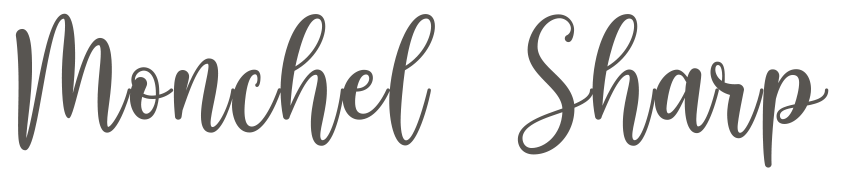
<style>
.page{position:relative;width:844px;height:181px;background:#ffffff}
.page>*{position:absolute;margin:0}
.t1{font:160.3px "betterPersonalUse";color:#585551;font-weight:bold}
</style>
<div class="page">
<p class="t1" style="left:15px;top:13px;width:814px;height:155px">Monchel Sharp</p>
</div>
